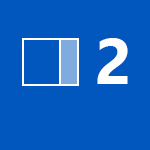
<style>
.page{position:relative;width:150px;height:150px;background:#0157be}
.page>*{position:absolute;margin:0}
.t1{font:64px "SegoeUI-Bold";color:#ffffff}
</style>
<div class="page">
<p class="t1" style="left:97px;top:38px;width:31px;height:46px">2</p>
</div>
